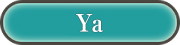
<style>
.page{position:relative;width:180px;height:45px;background:#239e9f}
.page>*{position:absolute;margin:0}
.t1{font:24px "RyuminPro-ExBold";letter-spacing:-0.08em;color:#ffffff;scale:0.9 1}
</style>
<div class="page">
<p class="t1" style="left:76px;top:14px;width:28px;height:18px">Ya</p>
</div>
